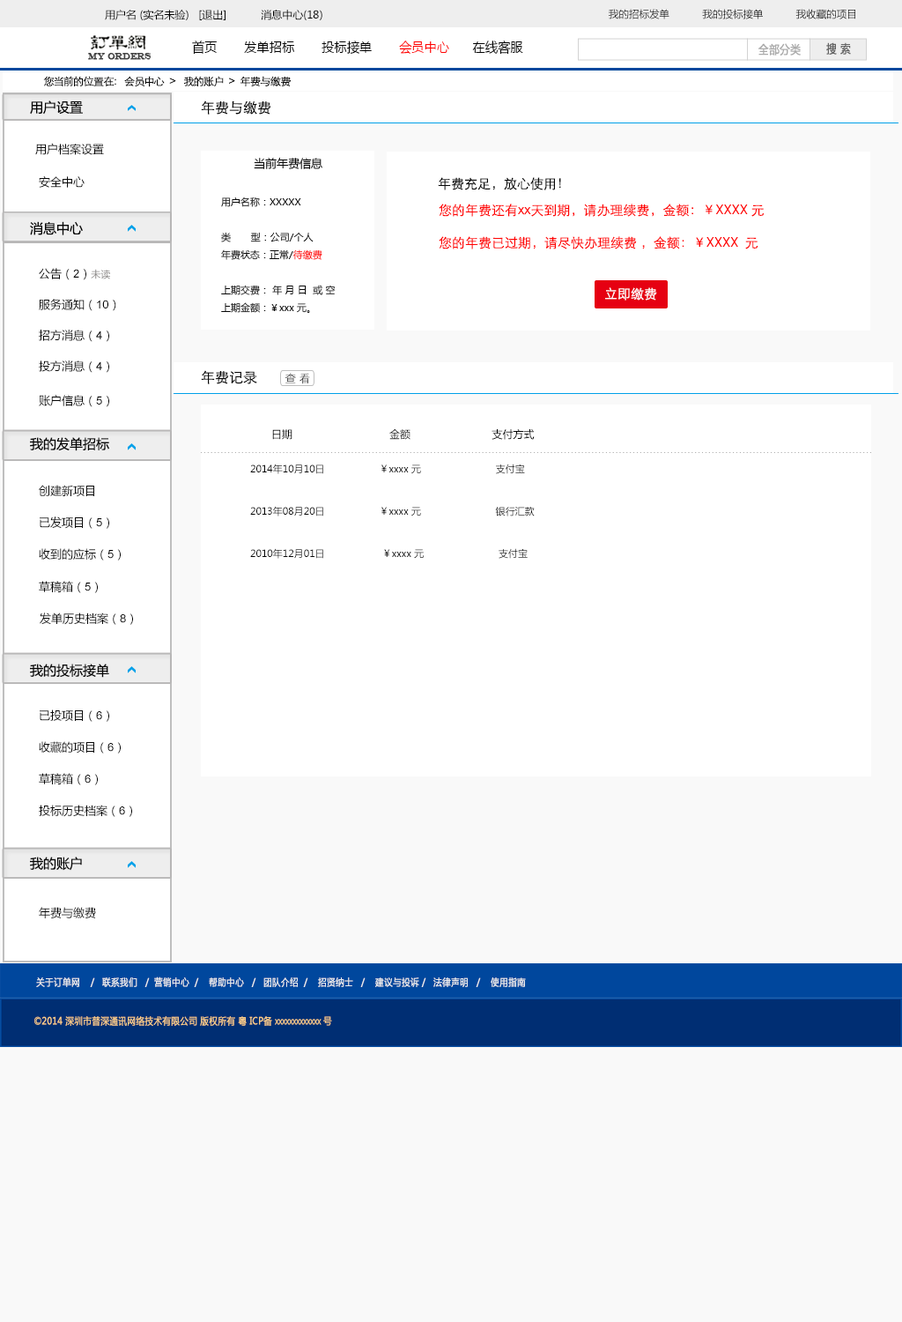
<style>
.page{position:relative;width:902px;height:1322px;background:#ffffff}
.page>*{position:absolute;margin:0}
.t1{font:10.6px "MicrosoftYaHei";color:#000000}
.t2{font:10.1px "MicrosoftYaHei";color:#000000}
.t3{font:13.6px "MicrosoftYaHei";color:#000000;font-variant:small-caps;scale:0.94 1}
.t4{font:13.6px "MicrosoftYaHei";color:#ff0000;font-variant:small-caps;scale:0.94 1}
.t5{font:8.7px "EngraversMT";color:#434343;font-variant:small-caps;font-weight:bold;scale:0.86 1}
.t6{font:11.6px "MicrosoftYaHei";color:#aaaaaa;font-variant:small-caps;font-weight:bold;scale:0.86 1}
.t7{font:11.6px "MicrosoftYaHei";color:#626262;font-variant:small-caps;font-weight:bold;scale:0.86 1}
.t8{font:10.6px "STXihei";color:#060606}
.t9{font:13.2px "MicrosoftYaHei";color:#060606}
.t10{font:14.1px "STXihei";color:#060606}
.t11{font:11.5px "MicrosoftYaHei";color:#060606}
.t12{font:13.2px "STXihei";color:#060606}
.t13{font:9.7px/17.6px "MicrosoftYaHei";color:#060606}
.t14{font:11.5px/17.6px "MicrosoftYaHei";color:#060606}
.t15{font:13.2px "STXihei";color:#ff0000}
.t16{font:11.5px "ArialMT";color:#060606}
.t17{font:9.7px "MicrosoftYaHei";color:#888584}
.t18{font:13.2px "STXihei";color:#ffffff}
.t19{font:11.5px "STXihei"}
.t20{font:9.7px/42.3px "MicrosoftYaHei";color:#000000}
.t21{font:9.7px "MicrosoftYaHei";color:#eeeeee;font-variant:small-caps;font-weight:bold;scale:0.86 1}
.t22{font:13.6px "STXihei";color:#eeeeee;font-variant:small-caps;font-weight:bold;scale:0.86 1}
.t23{font:9.7px "MicrosoftYaHei";color:#facd89;font-variant:small-caps;font-weight:bold;scale:0.87 1}
.t24{font:9.7px "MicrosoftYaHei";color:#eeeeee;font-variant:small-caps;font-weight:bold;scale:0.87 1}
</style>
<div class="page">
<p class="t1" style="left:105px;top:10px;width:217px;height:10px">用户名 (实名未验)   [退出]           消息中心(18)</p>
<p class="t2" style="left:609px;top:9px;width:247px;height:10px">我的招标发单           我的投标接单           我收藏的项目</p>
<p class="t3" style="left:192px;top:41px;width:331px;height:14px">首页       发单招标       投标接单       <span class="t4">会员中心</span>      在线客服</p>
<p class="t5" style="left:88px;top:53px;width:64px;height:7px">MY ORDERS</p>
<p class="t6" style="left:759px;top:43px;width:42px;height:13px">全部分类</p>
<p class="t7" style="left:826px;top:42px;width:25px;height:13px">搜 索</p>
<p class="t8" style="left:43px;top:76px;width:248px;height:11px">您当前的位置在：  会员中心  &gt;   我的账户  &gt;  年费与缴费</p>
<p class="t9" style="left:30px;top:100px;width:53px;height:15px">用户设置</p>
<p class="t10" style="left:201px;top:100px;width:70px;height:15px">年费与缴费</p>
<p class="t11" style="left:35px;top:143px;width:69px;height:12px">用户档案设置</p>
<p class="t11" style="left:254px;top:158px;width:68px;height:11px">当前年费信息</p>
<p class="t11" style="left:39px;top:176px;width:46px;height:12px">安全中心</p>
<p class="t12" style="left:438px;top:177px;width:123px;height:13px">年费充足，放心使用！</p>
<p class="t13" style="left:221px;top:196px;width:115px;height:117px"><span class="t14"><br><br></span>用户名称：XXXXX<br><br>类       型：公司/个人<br>年费状态：正常/待缴费<br><br>上期交费： 年 月 日  或 空<br>上期金额：￥xxx 元。</p>
<p class="t15" style="left:439px;top:204px;width:326px;height:13px">您的年费还有xx天到期，请办理续费，金额：￥XXXX 元</p>
<p class="t9" style="left:30px;top:221px;width:53px;height:14px">消息中心</p>
<p class="t15" style="left:439px;top:236px;width:320px;height:13px">您的年费已过期，请尽快办理续费 ，金额：￥XXXX  元</p>
<p class="t11" style="left:39px;top:268px;width:71px;height:12px">公告（<span class="t16">2</span>）<span class="t17">未读</span></p>
<p class="t18" style="left:605px;top:287px;width:52px;height:13px">立即缴费</p>
<p class="t11" style="left:39px;top:299px;width:77px;height:12px">服务通知（<span class="t16">10</span>）</p>
<p class="t11" style="left:39px;top:330px;width:70px;height:12px">招方消息（<span class="t16">4</span>）</p>
<p class="t11" style="left:39px;top:360px;width:70px;height:13px">投方消息（<span class="t16">4</span>）</p>
<p class="t10" style="left:201px;top:370px;width:56px;height:14px">年费记录</p>
<p class="t19" style="left:285px;top:373px;width:25px;height:11px">查 看</p>
<p class="t11" style="left:39px;top:395px;width:70px;height:12px">账户信息（<span class="t16">5</span>）</p>
<p class="t9" style="left:30px;top:437px;width:79px;height:14px">我的发单招标</p>
<p class="t1" style="left:272px;top:429px;width:263px;height:11px">日期                               金额                          支付方式</p>
<p class="t20" style="left:250px;top:463px;width:285px;height:96px">2014年10月10日                   ￥xxxx 元                          支付宝<br>2013年08月20日                   ￥xxxx 元                          银行汇款<br>2010年12月01日                    ￥xxxx 元                          支付宝</p>
<p class="t11" style="left:39px;top:485px;width:55px;height:12px">创建新项目</p>
<p class="t11" style="left:40px;top:516px;width:69px;height:13px">已发项目（<span class="t16">5</span>）</p>
<p class="t11" style="left:39px;top:548px;width:82px;height:12px">收到的应标（<span class="t16">5</span>）</p>
<p class="t11" style="left:39px;top:581px;width:59px;height:12px">草稿箱（<span class="t16">5</span>）</p>
<p class="t11" style="left:40px;top:612px;width:93px;height:13px">发单历史档案（<span class="t16">8</span>）</p>
<p class="t9" style="left:30px;top:663px;width:79px;height:15px">我的投标接单</p>
<p class="t11" style="left:40px;top:709px;width:69px;height:13px">已投项目（<span class="t16">6</span>）</p>
<p class="t11" style="left:39px;top:741px;width:82px;height:12px">收藏的项目（<span class="t16">6</span>）</p>
<p class="t11" style="left:39px;top:773px;width:59px;height:12px">草稿箱（<span class="t16">6</span>）</p>
<p class="t11" style="left:39px;top:804px;width:93px;height:13px">投标历史档案（<span class="t16">6</span>）</p>
<p class="t9" style="left:30px;top:856px;width:52px;height:15px">我的账户</p>
<p class="t11" style="left:39px;top:907px;width:57px;height:11px">年费与缴费</p>
<p class="t21" style="left:36px;top:976px;width:490px;height:11px"><span class="t22"><br><br></span>关于订单网    /   联系我们   /  营销中心  /    帮助中心   /   团队介绍  /    招贤纳士   /    建议与投诉 /   法律声明   /    使用指南</p>
<p class="t23" style="left:34px;top:1016px;width:298px;height:10px"><span class="t24"> </span>©2014 深圳市普深通讯网络技术有限公司 版权所有 粤 ICP备 xxxxxxxxxxxxx 号</p>
</div>
